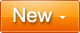
<style>
.page{position:relative;width:80px;height:33px}
.page>*{position:absolute;margin:0}
.t1{font:20px "ArialMT";color:#ffffff}
</style>
<div class="page">
<p class="t1" style="left:13px;top:7px;width:39px;height:16px">New</p>
</div>
